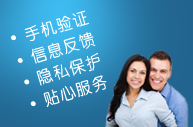
<style>
.page{position:relative;width:193px;height:127px}
.page>*{position:absolute;margin:0}
.t1{font:16.7px/22.5px "CTZhongYuanSJ";color:#ffffff}
.t2{font:27.9px/22.5px "CTZhongYuanSJ";color:#ffffff}
</style>
<div class="page">
<p class="t1" style="left:24px;top:10px;width:83px;height:97px;text-align:center;rotate:-17deg">手机验证<br>信息反馈<br>隐私保护<br>贴心服务</p>
<p class="t2" style="left:11px;top:35px;width:25px;height:72px;text-align:center;rotate:-17deg">·<br>·<br>·<br>·</p>
</div>
